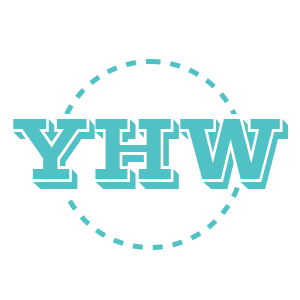
<style>
.page{position:relative;width:300px;height:300px;background:#ffffff}
.page>*{position:absolute;margin:0}
.t1{font:89px "VinetaBT-Regular";letter-spacing:-0.02em;color:#50c2c5;scale:0.82 1}
</style>
<div class="page">
<p class="t1" style="left:13px;top:119px;width:275px;height:70px">YHW</p>
</div>
